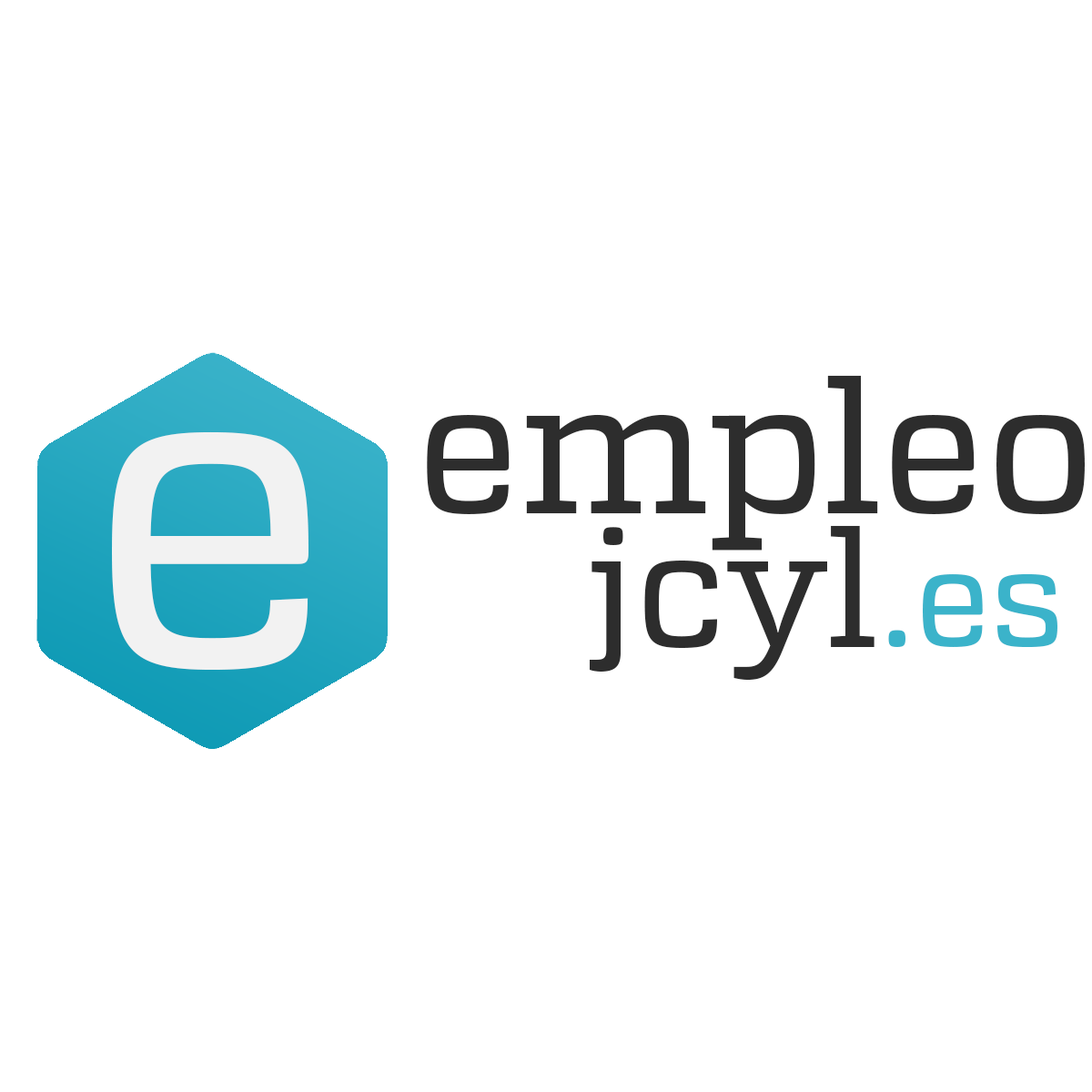
<style>
.page{position:relative;width:1092px;height:1092px;background:#ffffff}
.page>*{position:absolute;margin:0}
.t1{font:183.8px "Atletico-RegularDemo";color:#2d2d2d}
.t2{font:438.6px "Atletico-RegularDemo";color:#f2f2f2}
.t3{font:161.1px "Atletico-RegularDemo";color:#2d2d2d}
.t4{font:133.8px "Atletico-RegularDemo";color:#3bb3ca}
</style>
<div class="page">
<p class="t1" style="left:427px;top:375px;width:658px;height:176px">empleo</p>
<p class="t2" style="left:112px;top:431px;width:196px;height:239px">e</p>
<p class="t3" style="left:590px;top:525px;width:284px;height:156px">jcyl</p>
<p class="t4" style="left:888px;top:574px;width:169px;height:74px">.es</p>
</div>
